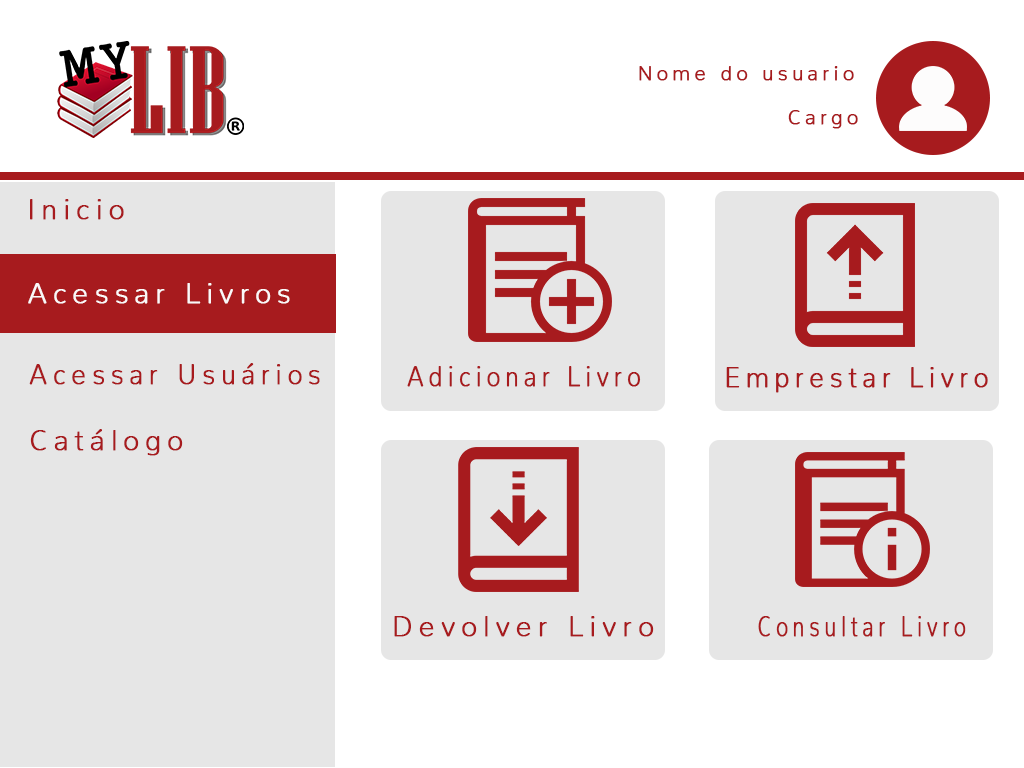
<style>
.page{position:relative;width:1024px;height:768px;background:#e6e6e6}
.page>*{position:absolute;margin:0}
.t1{font:20px "Nunito-ExtraLight";letter-spacing:0.2em;color:#a71b1e;font-weight:bold}
.t2{font:28px "Nunito-ExtraLight";letter-spacing:0.2em;color:#a71b1e;font-weight:bold}
.t3{font:28px "Nunito-ExtraLight";letter-spacing:0.2em;color:#fbf9f9;font-weight:bold}
.t4{font:28px "Nunito-ExtraLight";letter-spacing:0.2em;color:#a71b1e;font-weight:bold;scale:0.94 1}
.t5{font:28px "Nunito-ExtraLight";letter-spacing:0.2em;color:#a71b1e;font-weight:bold;scale:0.86 1}
.t6{font:28px "Nunito-ExtraLight";letter-spacing:0.2em;color:#a71b1e;font-weight:bold;scale:0.92 1}
.t7{font:28px "Nunito-ExtraLight";letter-spacing:0.2em;color:#a71b1e;font-weight:bold;scale:0.76 1}
</style>
<div class="page">
<p class="t1" style="left:639px;top:66px;width:215px;height:15px">Nome do usuario</p>
<p class="t1" style="left:788px;top:110px;width:70px;height:19px">Cargo</p>
<p class="t2" style="left:30px;top:199px;width:94px;height:21px">Inicio</p>
<p class="t3" style="left:28px;top:283px;width:262px;height:21px">Acessar Livros</p>
<p class="t4" style="left:29px;top:363px;width:291px;height:22px">Acessar Usuários</p>
<p class="t5" style="left:407px;top:366px;width:234px;height:21px">Adicionar Livro</p>
<p class="t6" style="left:726px;top:367px;width:262px;height:26px">Emprestar Livro</p>
<p class="t2" style="left:30px;top:429px;width:153px;height:27px">Catálogo</p>
<p class="t2" style="left:394px;top:616px;width:260px;height:21px">Devolver Livro</p>
<p class="t7" style="left:758px;top:616px;width:208px;height:21px">Consultar Livro</p>
</div>
